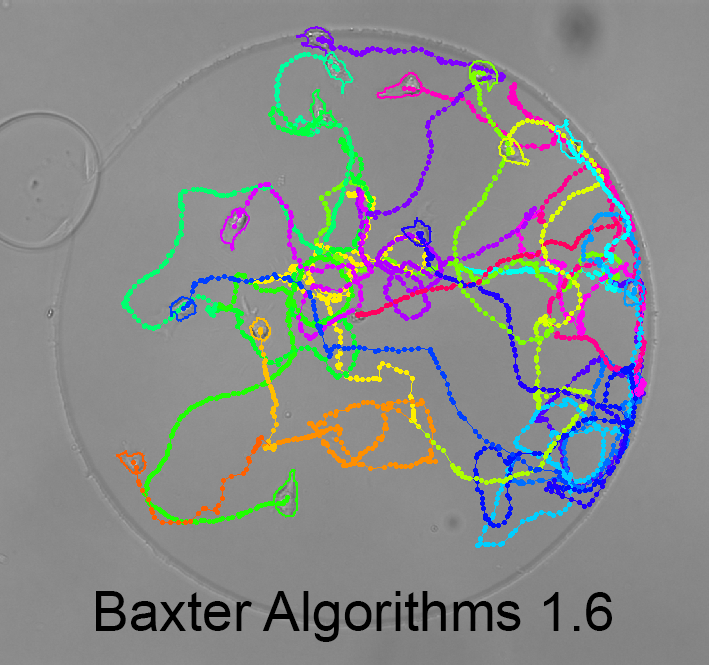
<style>
.page{position:relative;width:709px;height:665px}
.page>*{position:absolute;margin:0}
.t1{font:55px "ArialMT";color:#000000}
</style>
<div class="page">
<p class="t1" style="left:96px;top:591px;width:516px;height:51px">Baxter Algorithms 1.6</p>
</div>
